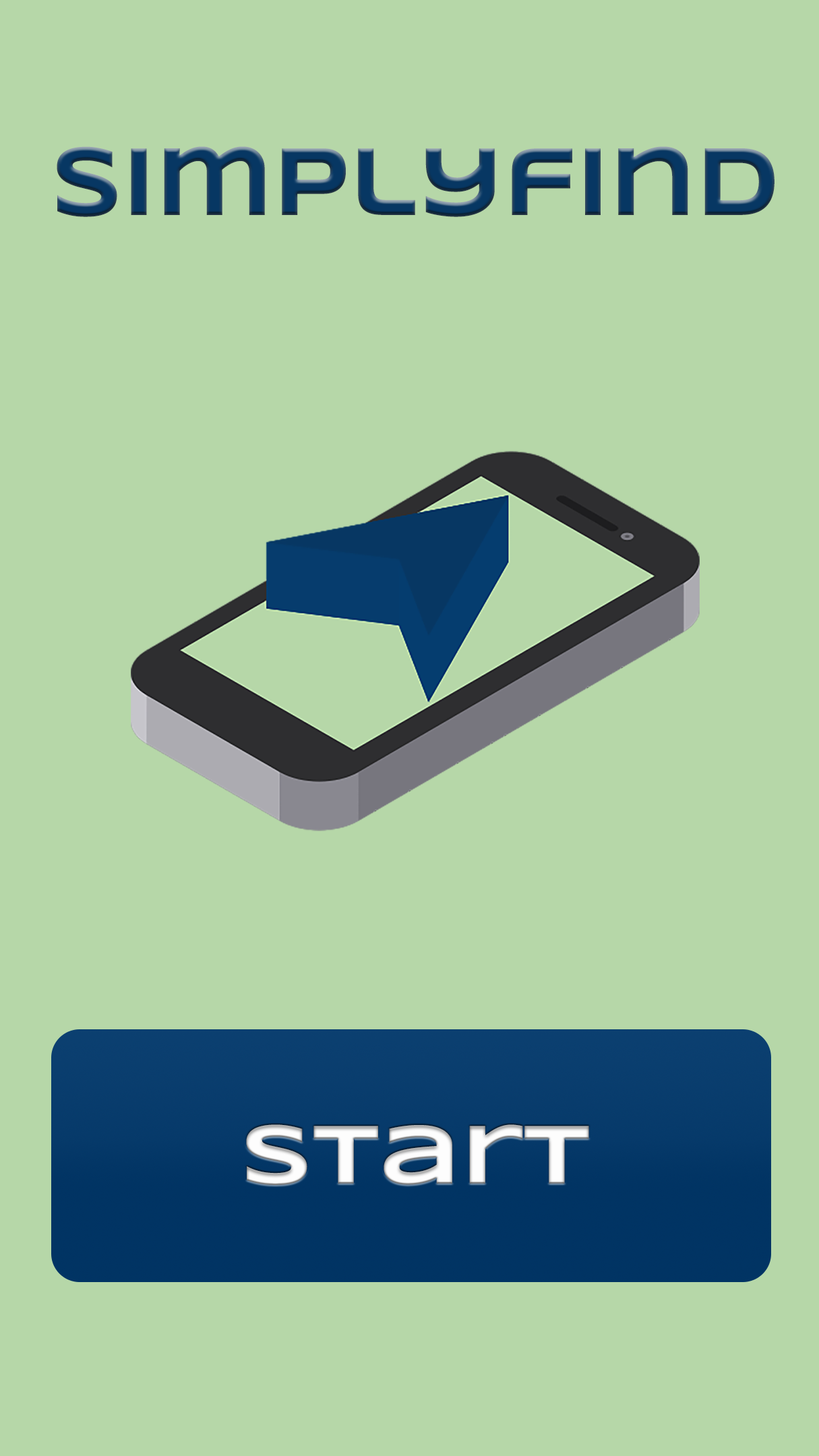
<style>
.page{position:relative;width:819px;height:1456px;background:#b6d7a8}
.page>*{position:absolute;margin:0}
.t1{font:99.2px "Syncopate-Bold";color:#073763;scale:0.85 1}
.t2{font:85.3px "Syncopate-Bold";color:#fdfdfd}
</style>
<div class="page">
<p class="t1" style="left:57px;top:146px;width:718px;height:71px">Simplyfind</p>
<p class="t2" style="left:246px;top:1124px;width:343px;height:61px">Start</p>
</div>
